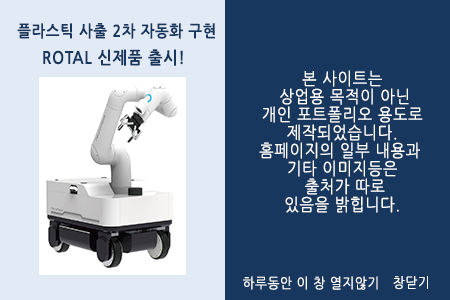
<style>
.page{position:relative;width:450px;height:300px;background:#17375e}
.page>*{position:absolute;margin:0}
.t1{font:16px "NanumGothicBold";letter-spacing:0.05em;color:#17375e;scale:0.9 1}
.t2{font:17px "NanumGothicBold";letter-spacing:0.05em;color:#17375e;scale:0.9 1}
.t3{font:17px/18px "NanumGothic";letter-spacing:0.05em;color:#ffffff;scale:0.9 1}
.t4{font:14px "NanumGothic";letter-spacing:0.05em;color:#ffffff;scale:0.9 1}
</style>
<div class="page">
<p class="t1" style="left:17px;top:23px;width:198px;height:16px">플라스틱 사출 2차 자동화 구현</p>
<p class="t2" style="left:43px;top:49px;width:140px;height:17px">ROTAL 신제품 출시!</p>
<p class="t3" style="left:259px;top:70px;width:164px;height:143px;text-align:center">본 사이트는<br> 상업용 목적이 아닌<br>개인 포트폴리오 용도로<br> 제작되었습니다. <br>홈페이지의 일부 내용과 <br>기타 이미지등은<br> 출처가 따로<br>있음을 밝힙니다.</p>
<p class="t4" style="left:243px;top:276px;width:135px;height:14px">하루동안 이 창 열지않기</p>
<p class="t4" style="left:393px;top:276px;width:35px;height:14px">창닫기</p>
</div>
